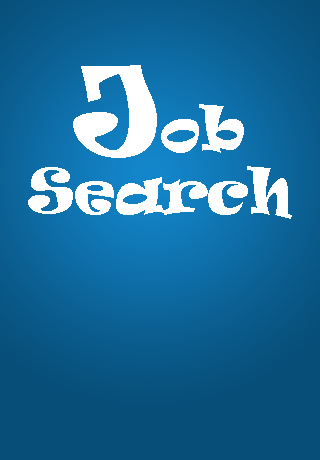
<style>
.page{position:relative;width:320px;height:460px}
.page>*{position:absolute;margin:0}
.t1{font:57px "Ravie";color:#ffffff}
.t2{font:113.9px "Ravie";color:#ffffff}
</style>
<div class="page">
<p class="t1" style="left:73px;top:65px;width:171px;height:93px"><span class="t2">J</span>ob</p>
<p class="t1" style="left:28px;top:166px;width:264px;height:53px">Search</p>
</div>
